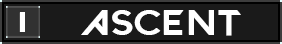
<style>
.page{position:relative;width:282px;height:44px;background:#1a1a1a}
.page>*{position:absolute;margin:0}
.t1{font:36.3px "VALORANT-Regular";color:#ffffff;scale:1.09 1}
</style>
<div class="page">
<p class="t1" style="left:81px;top:10px;width:160px;height:26px">ASCENT</p>
</div>
